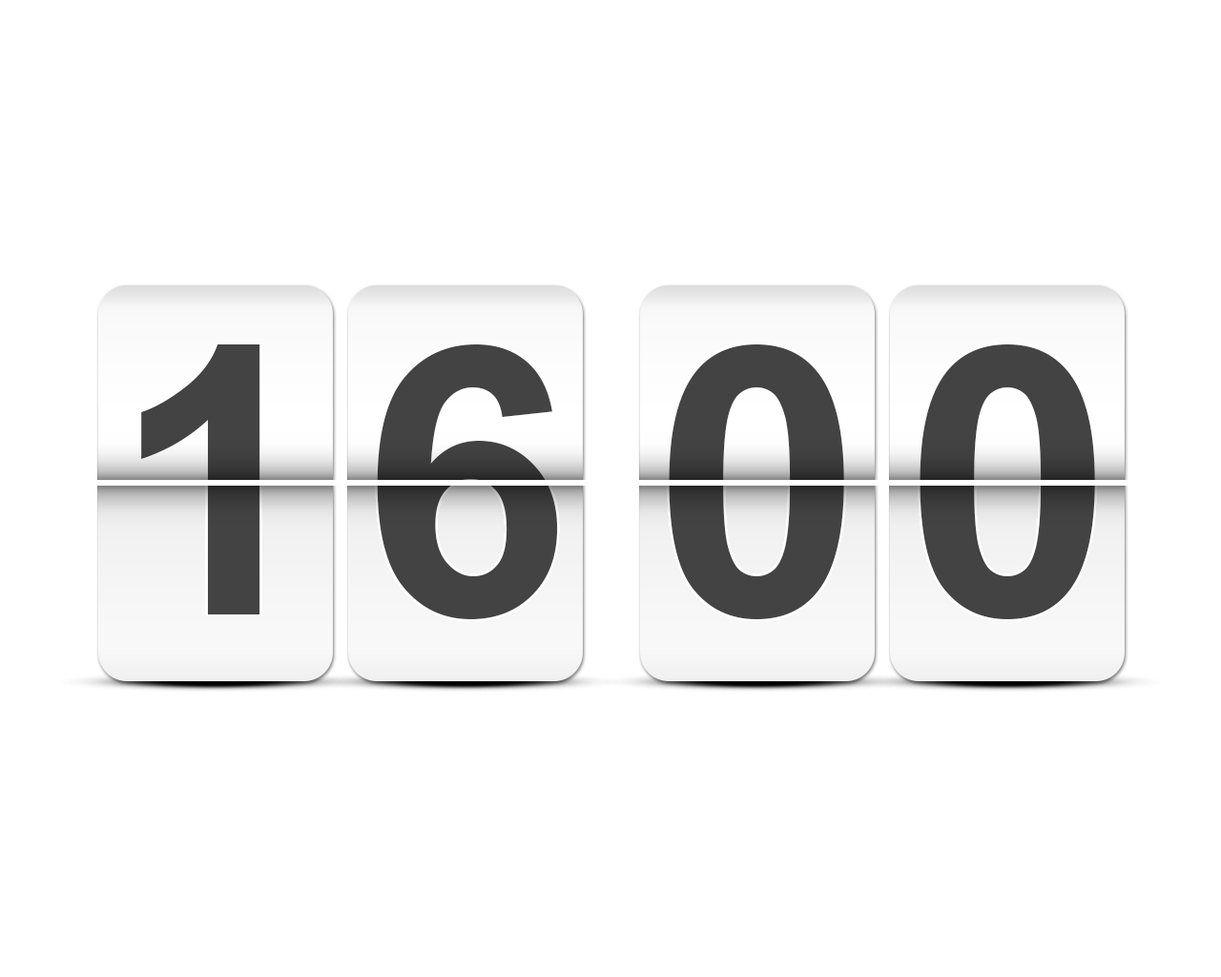
<style>
.page{position:relative;width:1221px;height:977px;background:#ffffff}
.page>*{position:absolute;margin:0}
.t1{font:375.8px "Arial-BoldMT";letter-spacing:0.11em;color:#434343}
.t2{font:375.8px "Arial-BoldMT";letter-spacing:0.22em;color:#434343}
</style>
<div class="page">
<p class="t1" style="left:141px;top:344px;width:954px;height:275px">1<span class="t2">6</span>00</p>
</div>
